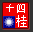
<style>
.page{position:relative;width:33px;height:32px;background:#f20000}
.page>*{position:absolute;margin:0}
.t1{font:10.4px "SimSun";color:#ffffff}
.t2{font:11.7px "SimSun";color:#ffffff}
</style>
<div class="page">
<p class="t1" style="left:6px;top:4px;width:19px;height:9px">十四</p>
<p class="t2" style="left:16px;top:15px;width:11px;height:12px">桂</p>
</div>
